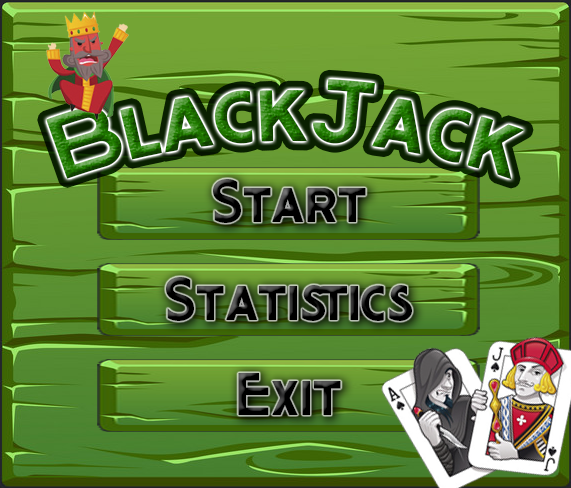
<style>
.page{position:relative;width:571px;height:488px}
.page>*{position:absolute;margin:0}
.t1{font:58.3px "Lavoir-SmallCaps";color:#000000}
</style>
<div class="page">
<p class="t1" style="left:213px;top:179px;width:153px;height:44px">Start</p>
<p class="t1" style="left:166px;top:277px;width:246px;height:44px">Statistics</p>
<p class="t1" style="left:238px;top:373px;width:103px;height:42px">Exit</p>
</div>
